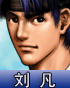
<style>
.page{position:relative;width:70px;height:88px}
.page>*{position:absolute;margin:0}
.t1{font:17px "SimHei";color:#efeaff}
</style>
<div class="page">
<p class="t1" style="left:14px;top:72px;width:42px;height:16px">刘 凡</p>
</div>
